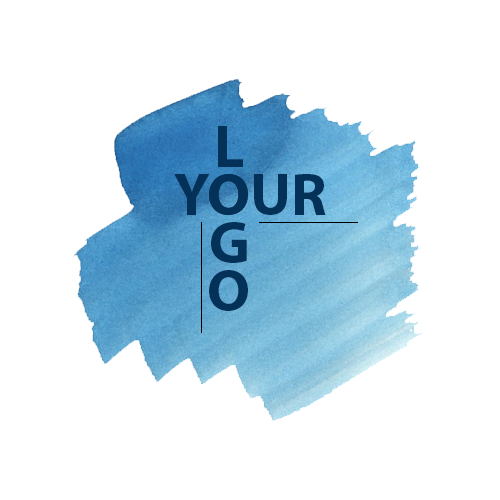
<style>
.page{position:relative;width:500px;height:500px;background:#ffffff}
.page>*{position:absolute;margin:0}
.t1{font:60px/48px "MyriadPro-Bold";color:#043157}
.t2{font:60px "MyriadPro-Bold";color:#043157}
</style>
<div class="page">
<p class="t1" style="left:209px;top:126px;width:39px;height:185px;text-align:center">L<br>O<br>G<br>O</p>
<p class="t2" style="left:174px;top:174px;width:152px;height:41px">YOUR</p>
</div>
